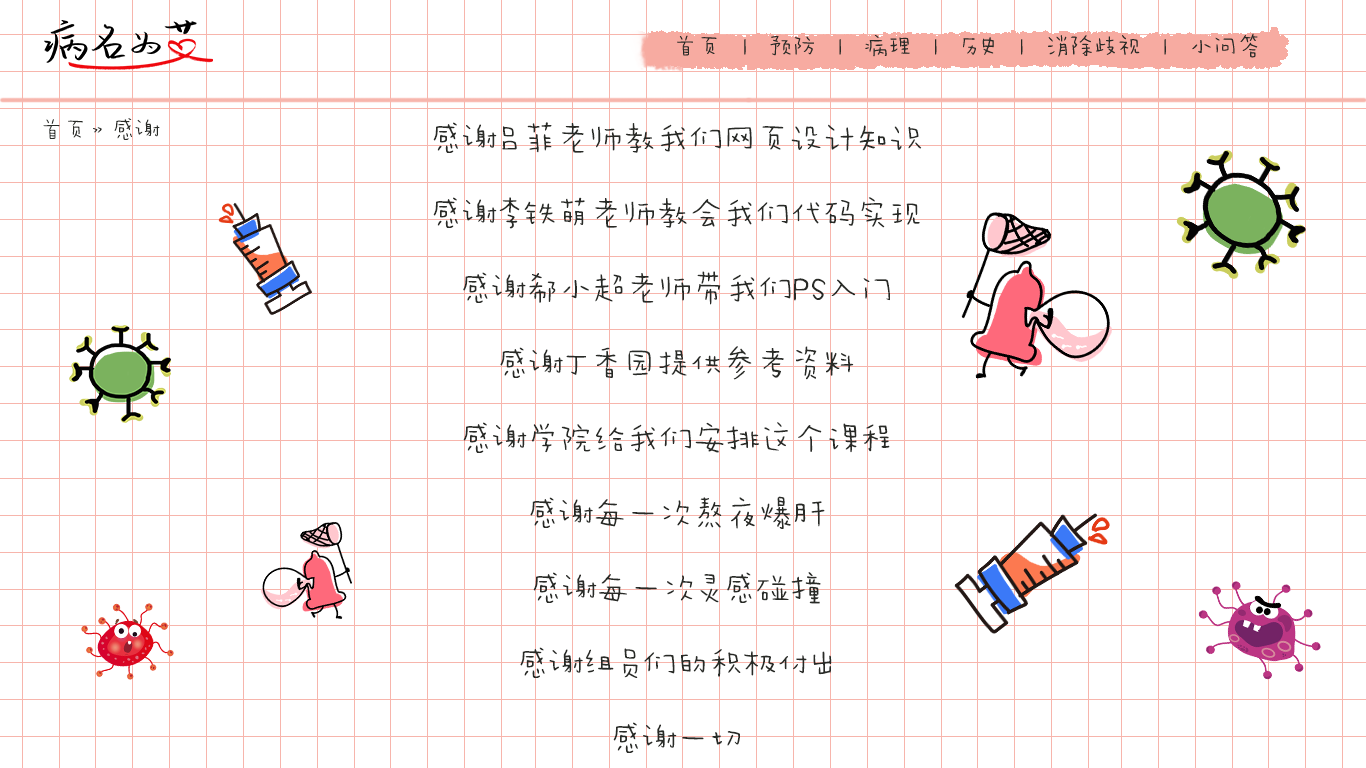
<style>
.page{position:relative;width:1366px;height:768px;background:#ffffff}
.page>*{position:absolute;margin:0}
.t1{font:24px "AaWanWan";color:#282a26}
.t2{font:33.3px/75px "AaWanWan";color:#282a26}
</style>
<div class="page">
<p class="t1" style="left:43px;top:118px;width:117px;height:22px">首页》感谢</p>
<p class="t2" style="left:433px;top:122px;width:489px;height:631px;text-align:center">感谢吕菲老师教我们网页设计知识<br>感谢李铁萌老师教会我们代码实现<br>感谢郗小超老师带我们PS入门<br>感谢丁香园提供参考资料<br>感谢学院给我们安排这个课程<br>感谢每一次熬夜爆肝<br>感谢每一次灵感碰撞<br>感谢组员们的积极付出<br>感谢一切</p>
</div>
